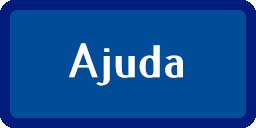
<style>
.page{position:relative;width:256px;height:128px;background:#004c98}
.page>*{position:absolute;margin:0}
.t1{font:48px "PfennigBold";color:#ffffff}
</style>
<div class="page">
<p class="t1" style="left:69px;top:43px;width:114px;height:43px">Ajuda</p>
</div>
